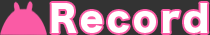
<style>
.page{position:relative;width:210px;height:35px;background:#333333}
.page>*{position:absolute;margin:0}
.t1{font:35px "HiraKakuStd-W8";letter-spacing:0.1em;color:#ffffff;scale:0.97 1}
</style>
<div class="page">
<p class="t1" style="left:51px;top:3px;width:157px;height:30px">Record</p>
</div>
